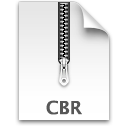
<style>
.page{position:relative;width:128px;height:128px;background:#ffffff}
.page>*{position:absolute;margin:0}
.t1{font:18.1px "LucidaSans-Demi";letter-spacing:-0.013em;color:#575757}
</style>
<div class="page">
<p class="t1" style="left:46px;top:100px;width:36px;height:15px">CBR</p>
</div>
